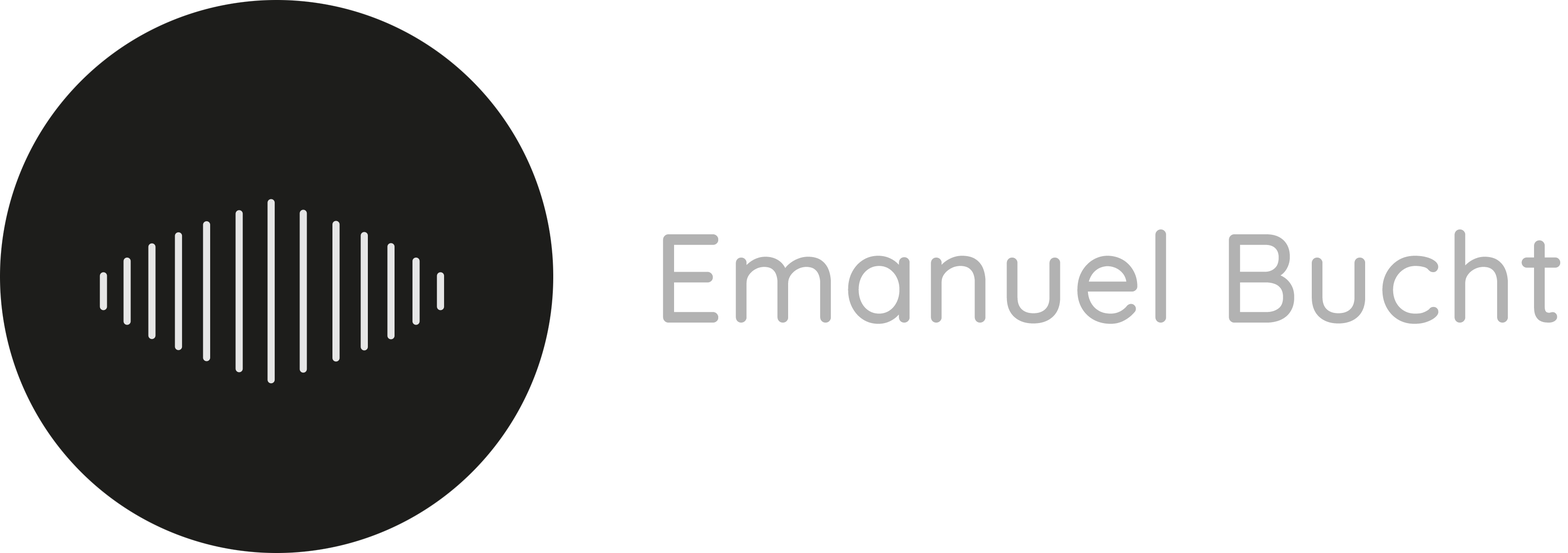
<style>
.page{position:relative;width:1568px;height:553px;background:#ffffff}
.page>*{position:absolute;margin:0}
.t1{font:121.3px "Quicksand-Regular";letter-spacing:0.02em;color:#b2b2b2;font-weight:bold}
</style>
<div class="page">
<p class="t1" style="left:663px;top:230px;width:897px;height:94px">Emanuel Bucht</p>
</div>
